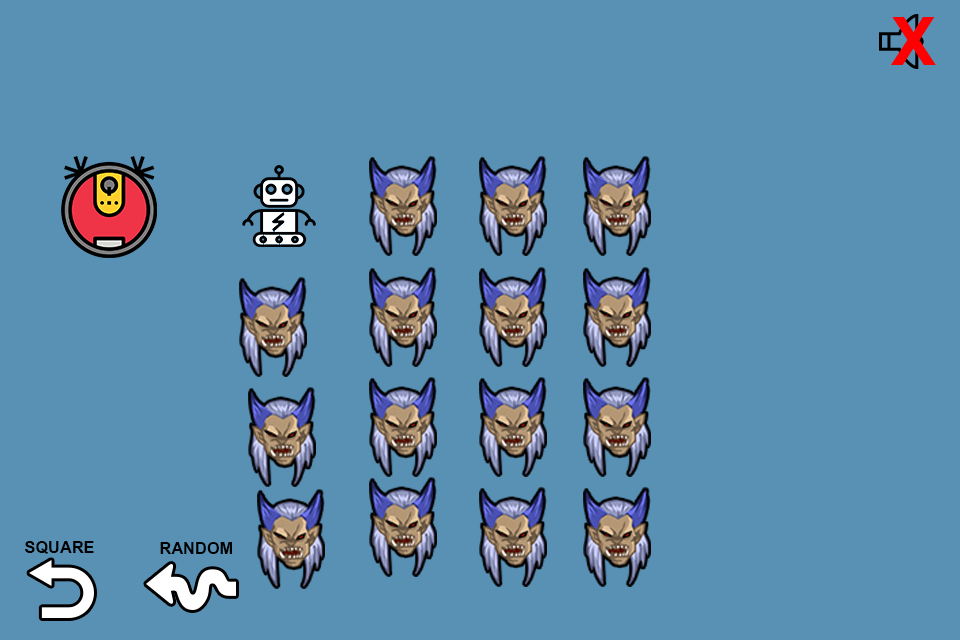
<style>
.page{position:relative;width:960px;height:640px;background:#5991b5}
.page>*{position:absolute;margin:0}
.t1{font:25px "BrowalliaNew-Bold";color:#000000}
</style>
<div class="page">
<p class="t1" style="left:25px;top:541px;width:69px;height:13px">SQUARE</p>
<p class="t1" style="left:160px;top:542px;width:72px;height:12px">RANDOM</p>
</div>
